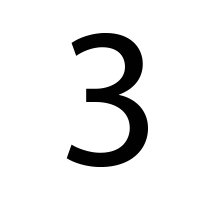
<style>
.page{position:relative;width:200px;height:200px;background:#ffffff}
.page>*{position:absolute;margin:0}
.t1{font:200px "MyriadPro-Regular";color:#010101}
</style>
<div class="page">
<p class="t1" style="left:66px;top:32px;width:82px;height:135px">3</p>
</div>
